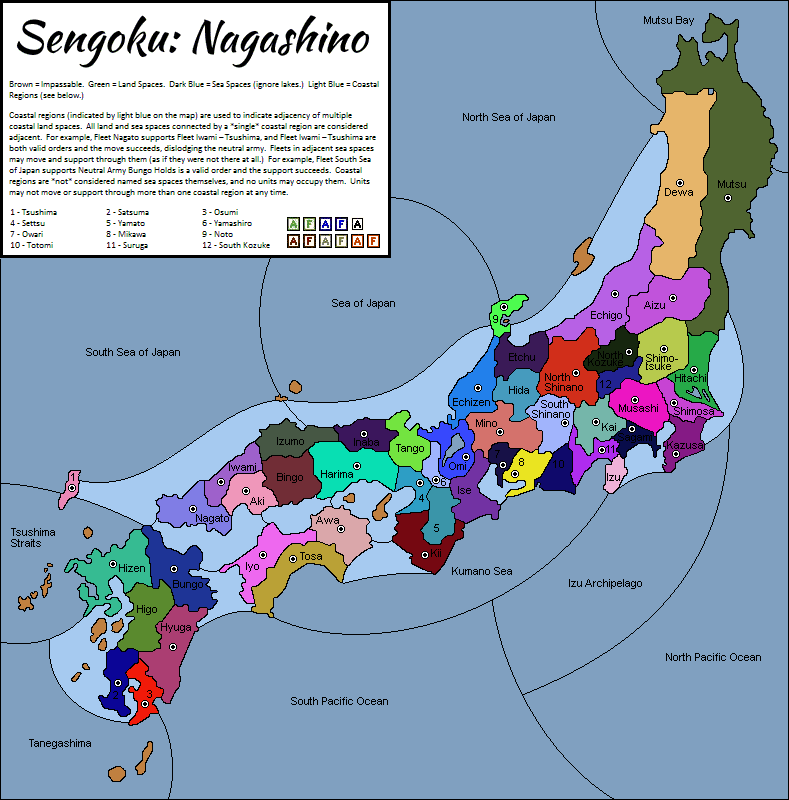
<style>
.page{position:relative;width:789px;height:800px;background:#80a0c0}
.page>*{position:absolute;margin:0}
.t1{font:10.7px "ArialMT";color:#000000}
.t2{font:10.7px/8px "ArialMT";color:#000000}
.t3{font:10.7px/10.7px "ArialMT";color:#000000}
</style>
<div class="page">
<p class="t1" style="left:644px;top:16px;width:50px;height:10px">Mutsu Bay</p>
<p class="t1" style="left:463px;top:113px;width:92px;height:10px">North Sea of Japan</p>
<p class="t1" style="left:718px;top:180px;width:28px;height:8px">Mutsu</p>
<p class="t1" style="left:665px;top:188px;width:28px;height:8px">Dewa</p>
<p class="t1" style="left:332px;top:299px;width:63px;height:10px">Sea of Japan</p>
<p class="t1" style="left:644px;top:301px;width:21px;height:8px">Aizu</p>
<p class="t1" style="left:493px;top:315px;width:5px;height:8px">9</p>
<p class="t1" style="left:591px;top:311px;width:31px;height:10px">Echigo</p>
<p class="t1" style="left:86px;top:348px;width:94px;height:10px">South Sea of Japan</p>
<p class="t1" style="left:509px;top:353px;width:26px;height:8px">Etchu</p>
<p class="t1" style="left:598px;top:351px;width:25px;height:8px">North</p>
<p class="t1" style="left:588px;top:358px;width:35px;height:8px">Kozuke</p>
<p class="t2" style="left:646px;top:354px;width:32px;height:16px">Shimo-<br>tsuke</p>
<p class="t3" style="left:545px;top:373px;width:38px;height:18px">North<br>Shinano</p>
<p class="t1" style="left:675px;top:374px;width:31px;height:8px">Hitachi</p>
<p class="t1" style="left:509px;top:386px;width:20px;height:8px">Hida</p>
<p class="t1" style="left:600px;top:380px;width:11px;height:8px">12</p>
<p class="t1" style="left:453px;top:398px;width:37px;height:8px">Echizen</p>
<p class="t3" style="left:532px;top:400px;width:38px;height:18px">South<br>Shinano</p>
<p class="t1" style="left:619px;top:404px;width:39px;height:8px">Musashi</p>
<p class="t1" style="left:674px;top:407px;width:40px;height:8px">Shimosa</p>
<p class="t1" style="left:476px;top:419px;width:21px;height:8px">Mino</p>
<p class="t1" style="left:602px;top:423px;width:14px;height:8px">Kai</p>
<p class="t1" style="left:277px;top:437px;width:27px;height:8px">Izumo</p>
<p class="t1" style="left:354px;top:438px;width:25px;height:8px">Inaba</p>
<p class="t1" style="left:618px;top:433px;width:34px;height:10px">Sagami</p>
<p class="t1" style="left:396px;top:444px;width:28px;height:10px">Tango</p>
<p class="t1" style="left:606px;top:445px;width:8px;height:8px">11</p>
<p class="t1" style="left:667px;top:441px;width:36px;height:8px">Kazusa</p>
<p class="t1" style="left:449px;top:462px;width:17px;height:8px">Omi</p>
<p class="t1" style="left:495px;top:450px;width:5px;height:8px">7</p>
<p class="t1" style="left:519px;top:458px;width:5px;height:8px">8</p>
<p class="t1" style="left:553px;top:460px;width:11px;height:8px">10</p>
<p class="t1" style="left:71px;top:473px;width:3px;height:8px">1</p>
<p class="t1" style="left:229px;top:463px;width:27px;height:8px">Iwami</p>
<p class="t1" style="left:277px;top:473px;width:26px;height:10px">Bingo</p>
<p class="t1" style="left:321px;top:470px;width:32px;height:8px">Harima</p>
<p class="t1" style="left:607px;top:473px;width:13px;height:8px">Izu</p>
<p class="t1" style="left:441px;top:478px;width:5px;height:8px">6</p>
<p class="t1" style="left:458px;top:486px;width:13px;height:8px">Ise</p>
<p class="t1" style="left:250px;top:497px;width:14px;height:8px">Aki</p>
<p class="t1" style="left:419px;top:494px;width:5px;height:8px">4</p>
<p class="t1" style="left:196px;top:514px;width:33px;height:10px">Nagato</p>
<p class="t1" style="left:316px;top:516px;width:23px;height:8px">Awa</p>
<p class="t3" style="left:11px;top:528px;width:44px;height:19px">Tsushima<br>Straits</p>
<p class="t1" style="left:434px;top:524px;width:5px;height:8px">5</p>
<p class="t1" style="left:300px;top:552px;width:22px;height:8px">Tosa</p>
<p class="t1" style="left:431px;top:549px;width:10px;height:8px">Kii</p>
<p class="t1" style="left:119px;top:564px;width:26px;height:8px">Hizen</p>
<p class="t1" style="left:246px;top:562px;width:13px;height:10px">Iyo</p>
<p class="t1" style="left:452px;top:567px;width:60px;height:8px">Kumano Sea</p>
<p class="t1" style="left:173px;top:580px;width:30px;height:10px">Bungo</p>
<p class="t1" style="left:569px;top:579px;width:73px;height:10px">Izu Archipelago</p>
<p class="t1" style="left:137px;top:605px;width:20px;height:10px">Higo</p>
<p class="t1" style="left:161px;top:623px;width:30px;height:10px">Hyuga</p>
<p class="t1" style="left:666px;top:653px;width:95px;height:8px">North Pacific Ocean</p>
<p class="t1" style="left:113px;top:691px;width:5px;height:8px">2</p>
<p class="t1" style="left:147px;top:690px;width:5px;height:8px">3</p>
<p class="t1" style="left:291px;top:697px;width:97px;height:8px">South Pacific Ocean</p>
<p class="t1" style="left:29px;top:739px;width:62px;height:10px">Tanegashima</p>
</div>
